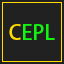
<style>
.page{position:relative;width:64px;height:64px;background:#212121}
.page>*{position:absolute;margin:0}
.t1{font:20.8px "AdobeFanHeitiStd-Bold";color:#12f60f}
.t2{font:20.8px "AdobeFanHeitiStd-Bold";color:#ffdb00}
</style>
<div class="page">
<p class="t1" style="left:9px;top:24px;width:46px;height:16px"><span class="t2">C</span>EPL</p>
</div>
